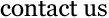
<style>
.page{position:relative;width:109px;height:18px;background:#ffffff}
.page>*{position:absolute;margin:0}
.t1{font:24px "Georgia";color:#000000}
</style>
<div class="page">
<p class="t1" style="left:0px;top:1px;width:107px;height:16px">contact us</p>
</div>
